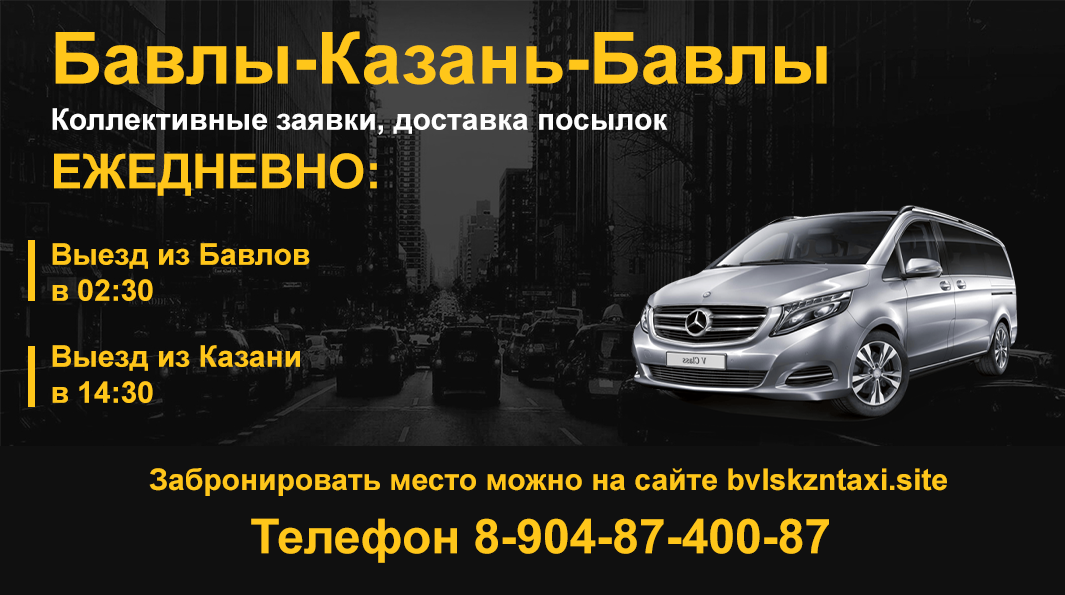
<style>
.page{position:relative;width:1065px;height:595px;background:#101010}
.page>*{position:absolute;margin:0}
.t1{font:72px "Arial-BoldMT";color:#ffc61a}
.t2{font:30px "Arial-BoldMT";color:#fefefe}
.t3{font:48px "Arial-BoldMT";color:#ffc61a}
.t4{font:30px "Arial-BoldMT";color:#ffc61a}
</style>
<div class="page">
<p class="t1" style="left:55px;top:31px;width:772px;height:54px">Бавлы-Казань-Бавлы</p>
<p class="t2" style="left:52px;top:108px;width:616px;height:27px">Коллективные заявки, доставка посылок</p>
<p class="t3" style="left:54px;top:153px;width:323px;height:43px">ЕЖЕДНЕВНО:</p>
<p class="t4" style="left:52px;top:243px;width:258px;height:58px;text-align:right">Выезд из Бавлов<br>в 02:30</p>
<p class="t4" style="left:52px;top:345px;width:248px;height:58px;text-align:right">Выезд из Казани<br>в 14:30</p>
<p class="t4" style="left:149px;top:468px;width:798px;height:28px">Забронировать место можно на сайте bvlskzntaxi.site</p>
<p class="t3" style="left:251px;top:518px;width:578px;height:45px">Телефон 8-904-87-400-87</p>
</div>
